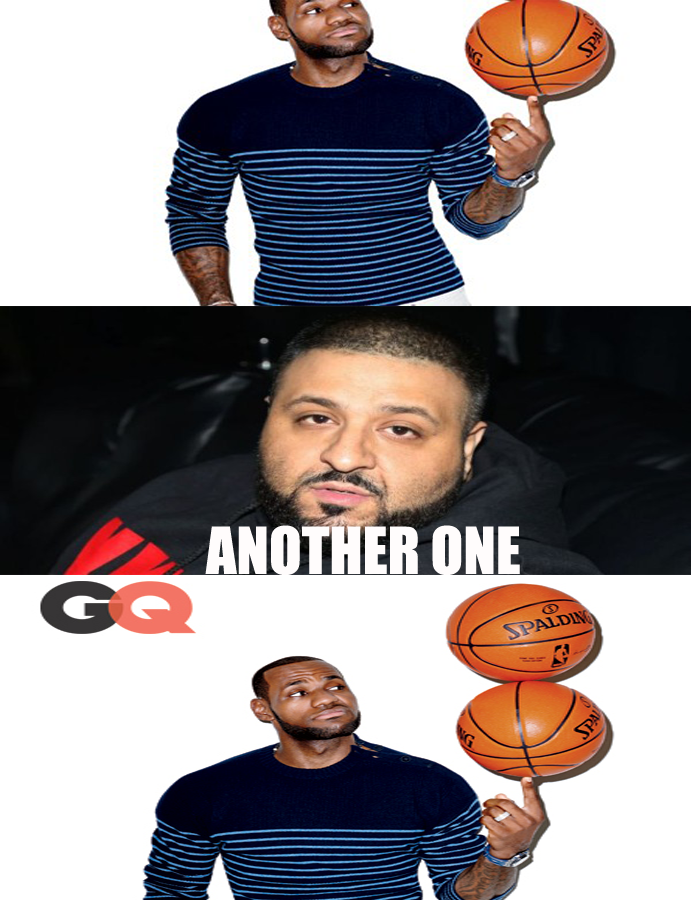
<style>
.page{position:relative;width:700px;height:900px;background:#ffffff}
.page>*{position:absolute;margin:0}
.t1{font:60px "Impact";color:#fffcfc}
</style>
<div class="page">
<p class="t1" style="left:205px;top:525px;width:315px;height:50px">ANOTHER ONE</p>
</div>
